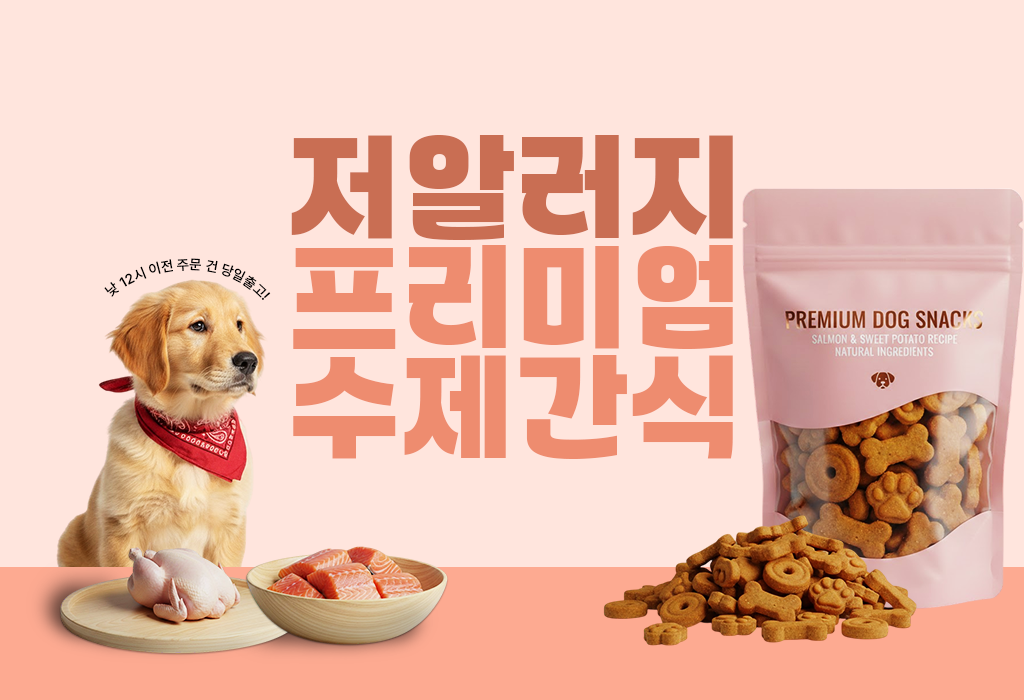
<style>
.page{position:relative;width:1024px;height:700px;background:#ffe5dd}
.page>*{position:absolute;margin:0}
.t1{font:120px/110px "WAGURI-TTF";letter-spacing:0.01em;color:#ee8c6f;text-transform:uppercase}
.t2{font:120px/110px "WAGURI-TTF";letter-spacing:0.01em;color:#c96e53;text-transform:uppercase}
.t3{font:14px "Pretendard-Medium";color:#000000;text-transform:uppercase}
</style>
<div class="page">
<p class="t1" style="left:291px;top:135px;width:442px;height:324px;text-align:center"><span class="t2">저알러지<br></span>프리미엄<br>수제간식</p>
<p class="t3" style="left:104px;top:258px;width:167px;height:42px;text-align:right">낮 12시 이전 주문 건 당일출고!</p>
</div>
